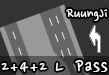
<style>
.page{position:relative;width:109px;height:75px;background:#333333}
.page>*{position:absolute;margin:0}
.t1{font:16px "NanumPen";color:#ffffff}
.t2{font:18px "NanumPen";letter-spacing:0.1em;color:#ffffff}
.t3{font:20px "NanumPen";letter-spacing:0.05em;color:#ffffff}
</style>
<div class="page">
<p class="t1" style="left:66px;top:9px;width:42px;height:12px">RuungJi</p>
<p class="t2" style="left:1px;top:62px;width:63px;height:10px">2+4+2 L</p>
<p class="t3" style="left:75px;top:59px;width:33px;height:13px">Pass</p>
</div>
